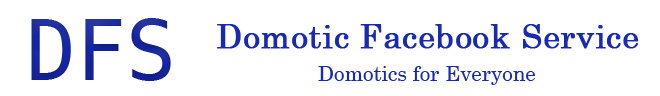
<style>
.page{position:relative;width:660px;height:96px;background:#ffffff}
.page>*{position:absolute;margin:0}
.t1{font:83.3px "DejaVuSansMono";color:#15259c}
.t2{font:33.3px "Century";color:#1729b5;font-weight:bold}
.t3{font:20.8px "Century";color:#1729b5}
</style>
<div class="page">
<p class="t1" style="left:31px;top:18px;width:140px;height:63px">DFS</p>
<p class="t2" style="left:217px;top:24px;width:422px;height:25px">Domotic Facebook Service</p>
<p class="t3" style="left:318px;top:66px;width:217px;height:19px">Domotics for Everyone</p>
</div>
